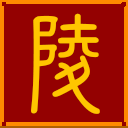
<style>
.page{position:relative;width:128px;height:128px;background:#940101}
.page>*{position:absolute;margin:0}
.t1{font:118px "DFNewChuan-Md-HKP-BF";color:#ffc600}
</style>
<div class="page">
<p class="t1" style="left:31px;top:13px;width:69px;height:101px">陵</p>
</div>
